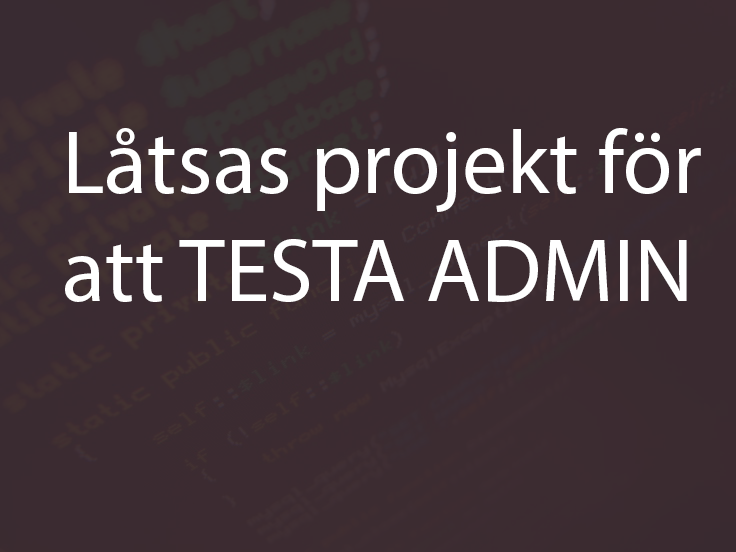
<style>
.page{position:relative;width:736px;height:552px}
.page>*{position:absolute;margin:0}
.t1{font:90px "MyriadPro-Regular";color:#ffffff}
</style>
<div class="page">
<p class="t1" style="left:65px;top:128px;width:636px;height:174px;text-align:justify">Låtsas projekt för <br>att TESTA ADMIN</p>
</div>
